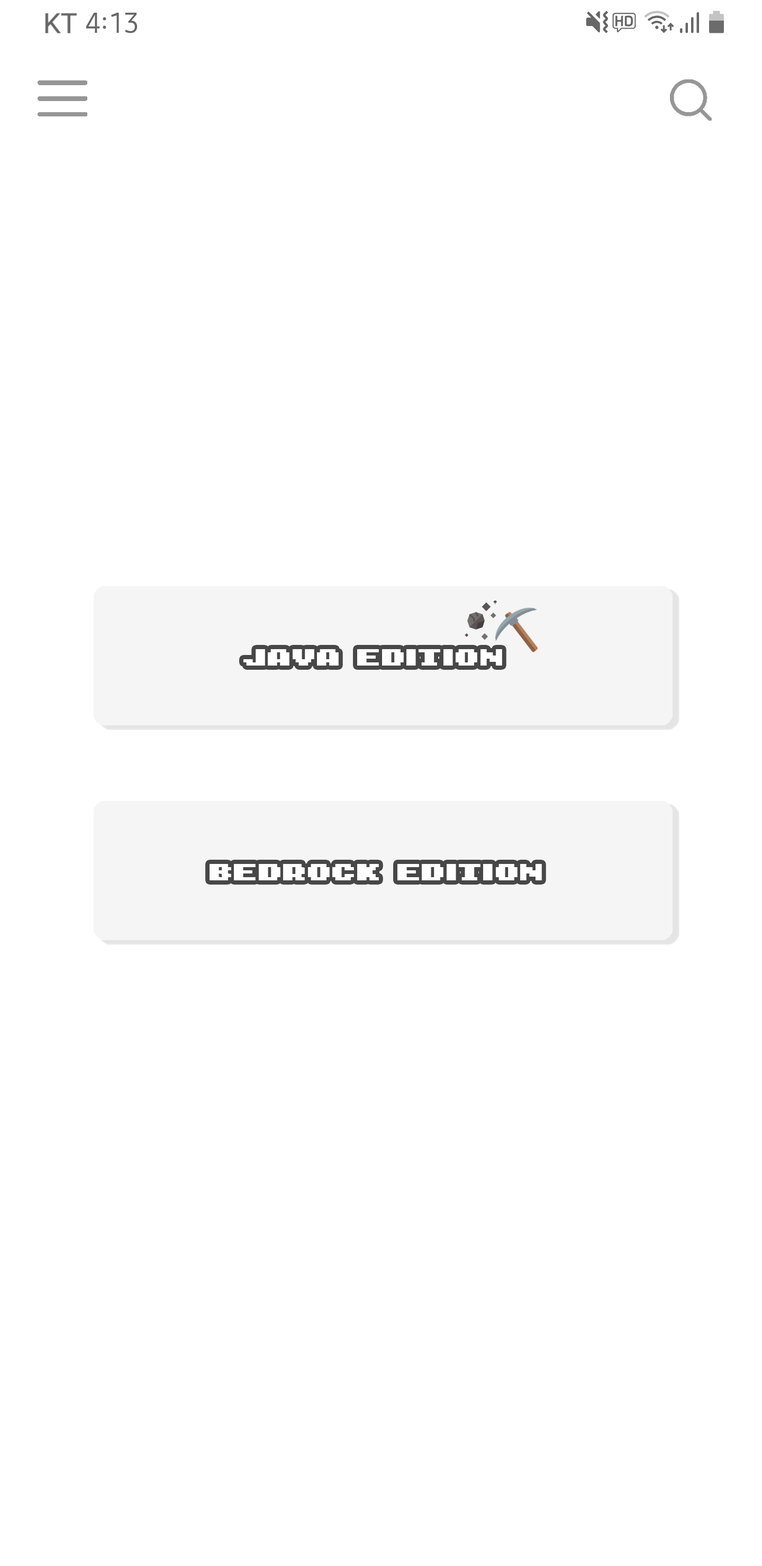
<style>
.page{position:relative;width:762px;height:1566px;background:#ffffff}
.page>*{position:absolute;margin:0}
.t1{font:52.4px "8-bit-Arcade-In";color:#ffffff;scale:0.94 1}
</style>
<div class="page">
<p class="t1" style="left:243px;top:649px;width:259px;height:16px">JAVA EDITION</p>
<p class="t1" style="left:209px;top:864px;width:333px;height:16px">BEDROCK EDITION</p>
</div>
